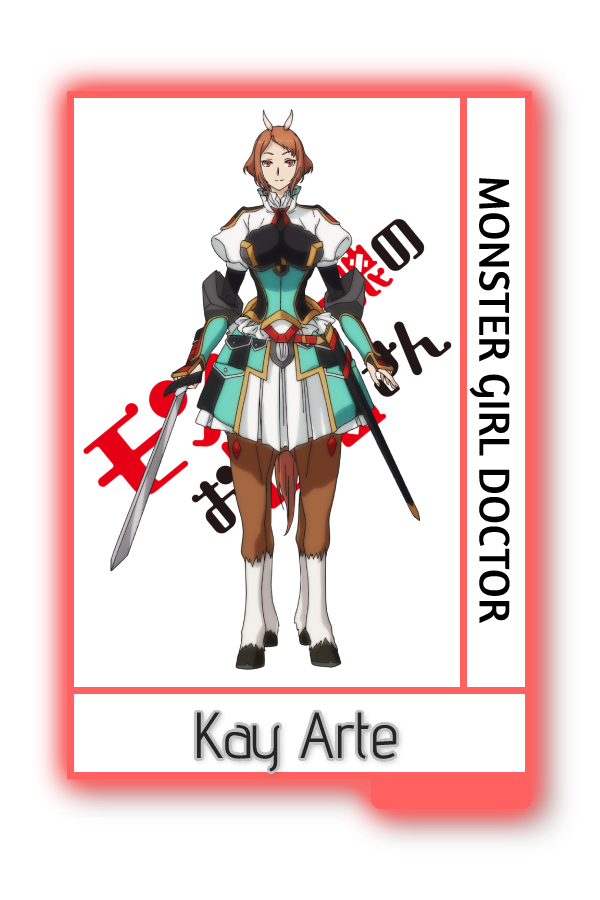
<style>
.page{position:relative;width:600px;height:900px;background:#ffffff}
.page>*{position:absolute;margin:0}
.t1{font:44px "Amaranth-Regular";color:#000000}
.t2{font:65px "AdventPro-Regular";color:#252525}
</style>
<div class="page">
<p class="t1" style="left:469px;top:178px;width:41px;height:446px;rotate:90deg">MONSTER GIRL DOCTOR</p>
<p class="t2" style="left:197px;top:712px;width:200px;height:60px">Kay Arte</p>
</div>
